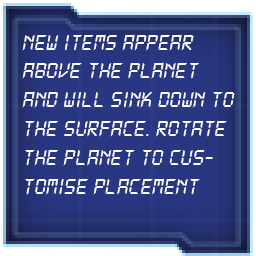
<style>
.page{position:relative;width:256px;height:256px;background:#293782}
.page>*{position:absolute;margin:0}
.t1{font:24px "DS-Digital";color:#ffffff;font-style:italic}
</style>
<div class="page">
<p class="t1" style="left:22px;top:34px;width:213px;height:161px">New items appear above the planet and will sink down to the surface. Rotate the planet to customise placement</p>
</div>
